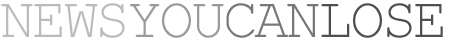
<style>
.page{position:relative;width:450px;height:42px;background:#ffffff}
.page>*{position:absolute;margin:0}
.t1{font:57.8px "CourierNewPSMT";letter-spacing:-0.05em;color:#bbbbbb}
.t2{font:57.8px "CourierNewPSMT";letter-spacing:-0.05em;color:#9a9a9a}
.t3{font:57.8px "CourierNewPSMT";letter-spacing:-0.05em;color:#777777}
.t4{font:57.8px "CourierNewPSMT";letter-spacing:-0.05em;color:#4f4f4f}
</style>
<div class="page">
<p class="t1" style="left:1px;top:3px;width:442px;height:35px">NEWS<span class="t2">YOU</span><span class="t3">CAN</span><span class="t4">LOSE</span></p>
</div>
